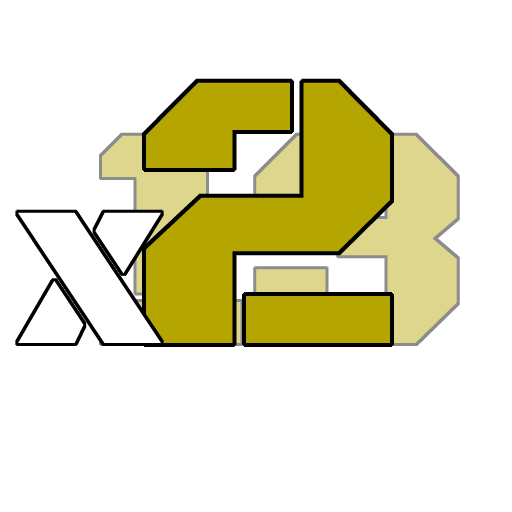
<style>
.page{position:relative;width:512px;height:512px;background:#ffffff}
.page>*{position:absolute;margin:0}
.t1{font:400.1px "BlackOpsOne-Regular";color:#b4a500}
.t2{font:250px "BlackOpsOne-Regular";color:#ffffff}
</style>
<div class="page">
<p class="t1" style="left:146px;top:82px;width:244px;height:261px">2</p>
<p class="t2" style="left:18px;top:212px;width:143px;height:131px">x</p>
</div>
